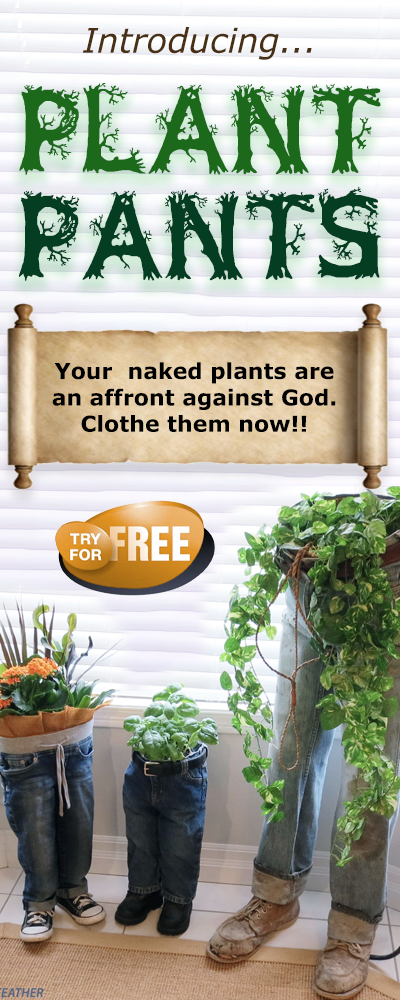
<style>
.page{position:relative;width:400px;height:1000px}
.page>*{position:absolute;margin:0}
.t1{font:34px "Verdana-Italic";color:#493014}
.t2{font:98px/106px "JFWildWood";color:#1d691c}
.t3{font:98px/106px "JFWildWood";color:#053d23}
.t4{font:22px "Verdana-Bold";color:#000000}
</style>
<div class="page">
<p class="t1" style="left:83px;top:27px;width:229px;height:33px">Introducing...</p>
<p class="t2" style="left:19px;top:83px;width:362px;height:198px;text-align:center">PLANT<br><span class="t3">PANTS</span></p>
<p class="t4" style="left:52px;top:362px;width:284px;height:70px;text-align:center">Your  naked plants are an affront against God. Clothe them now!!</p>
</div>
